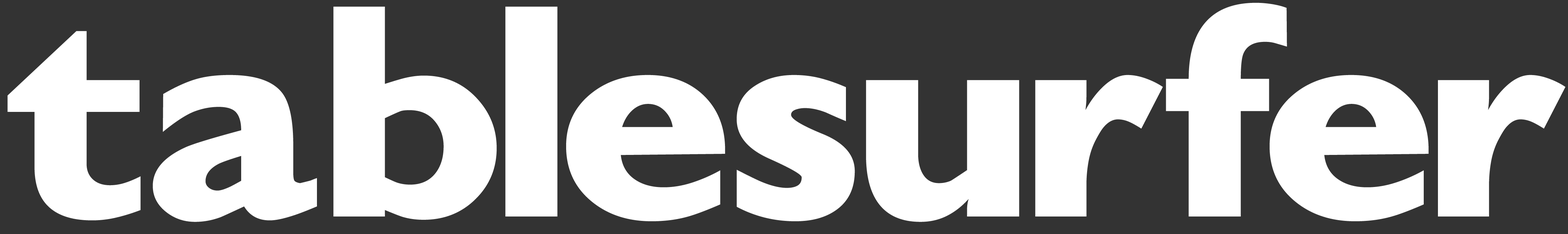
<style>
.page{position:relative;width:1568px;height:234px;background:#333333}
.page>*{position:absolute;margin:0}
.t1{font:296.9px "Gibson-Bold";letter-spacing:-0.065em;color:#ffffff;scale:1.09 1}
.t2{font:296.9px "Gibson-Bold";letter-spacing:0.045em;color:#ffffff;scale:1.09 1}
.t3{font:296.9px "Gibson-Bold";letter-spacing:-0.01em;color:#ffffff;scale:1.09 1}
.t4{font:296.9px "Gibson-Bold";letter-spacing:-0.09em;color:#ffffff;scale:1.09 1}
.t5{font:296.9px "Gibson-Bold";letter-spacing:-0.05em;color:#ffffff;scale:1.09 1}
.t6{font:296.9px "Gibson-Bold";letter-spacing:-0.015em;color:#ffffff;scale:1.09 1}
.t7{font:296.9px "Gibson-Bold";letter-spacing:-0.04em;color:#ffffff;scale:1.09 1}
.t8{font:296.9px "Gibson-Bold";letter-spacing:-0.07em;color:#ffffff;scale:1.09 1}
.t9{font:296.9px "Gibson-Bold";letter-spacing:0.03em;color:#ffffff;scale:1.09 1}
.t10{font:296.9px "Gibson-Bold";letter-spacing:-0.035em;color:#ffffff;scale:1.09 1}
</style>
<div class="page">
<p class="t1" style="left:7px;top:3px;width:1558px;height:219px"><span class="t2">t</span><span class="t3">a</span><span class="t4">b</span><span class="t5">l</span><span class="t6">e</span><span class="t7">s</span><span class="t8">u</span><span class="t9">r</span><span class="t10">f</span>er</p>
</div>
